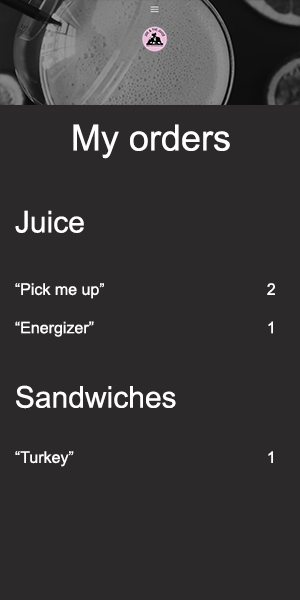
<style>
.page{position:relative;width:300px;height:600px;background:#2b2929}
.page>*{position:absolute;margin:0}
.t1{font:36px "ArialMT";color:#ffffff}
.t2{font:16px "ArialMT";color:#ffffff}
.t3{font:24px "ArialMT";color:#ffffff}
.t4{font:30px "ArialMT";color:#ffffff}
</style>
<div class="page">
<p class="t1" style="left:73px;top:124px;width:157px;height:35px">My orders</p>
<p class="t2" style="left:15px;top:210px;width:260px;height:257px;text-align:center"><span class="t3"><br></span><span class="t4">Juice<br><br></span>“Pick me up”     2<br><br>“Energizer”     1<br><br><br><span class="t4">Sandwiches<br><br></span>“Turkey”      1</p>
</div>
